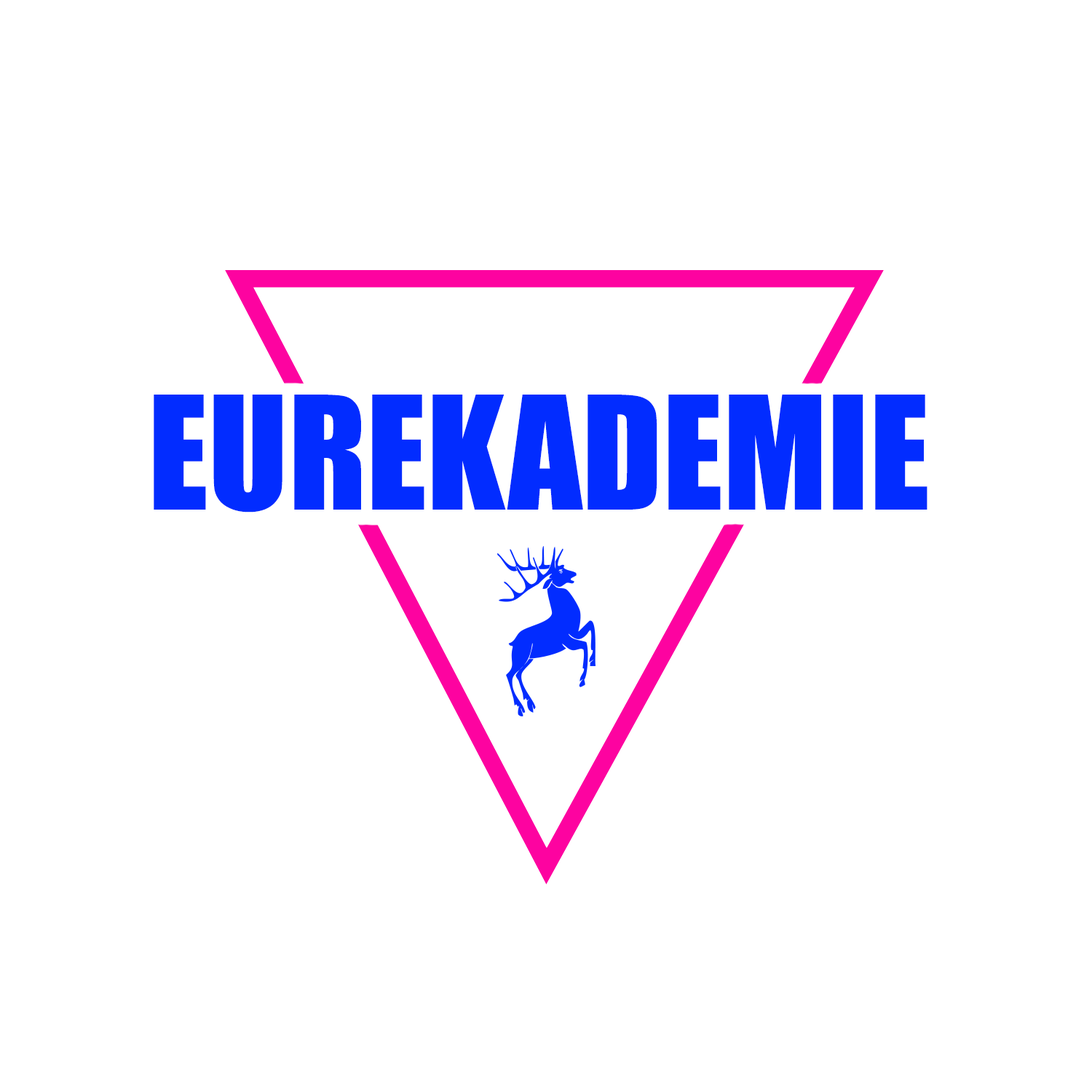
<style>
.page{position:relative;width:1092px;height:1092px;background:#ffffff}
.page>*{position:absolute;margin:0}
.t1{font:145.6px "Impact";color:#022cff}
</style>
<div class="page">
<p class="t1" style="left:154px;top:395px;width:773px;height:118px">EUREKADEMIE</p>
</div>
